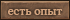
<style>
.page{position:relative;width:70px;height:20px}
.page>*{position:absolute;margin:0}
.t1{font:10.5px "CooperMediumCBT";letter-spacing:0.03em;color:#d2a37e}
</style>
<div class="page">
<p class="t1" style="left:8px;top:9px;width:55px;height:6px">есть опыт</p>
</div>
